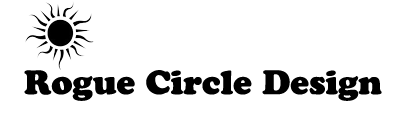
<style>
.page{position:relative;width:400px;height:115px;background:#ffffff}
.page>*{position:absolute;margin:0}
.t1{font:33.3px "CooperBlackStd";color:#000000}
</style>
<div class="page">
<p class="t1" style="left:24px;top:70px;width:358px;height:31px">Rogue Circle Design</p>
</div>
